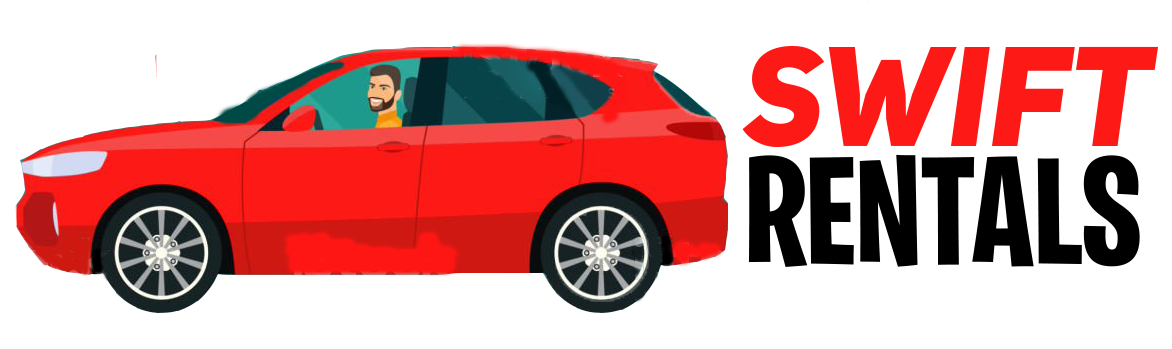
<style>
.page{position:relative;width:1172px;height:349px;background:#ffffff}
.page>*{position:absolute;margin:0}
.t1{font:139.7px "UniSansHeavyItalicCAPS";color:#fd1916}
.t2{font:153.2px "BurbankBigCondensed-Bold";color:#000000}
</style>
<div class="page">
<p class="t1" style="left:742px;top:46px;width:416px;height:102px">Swift</p>
<p class="t2" style="left:748px;top:154px;width:392px;height:113px">RENTALS</p>
</div>
